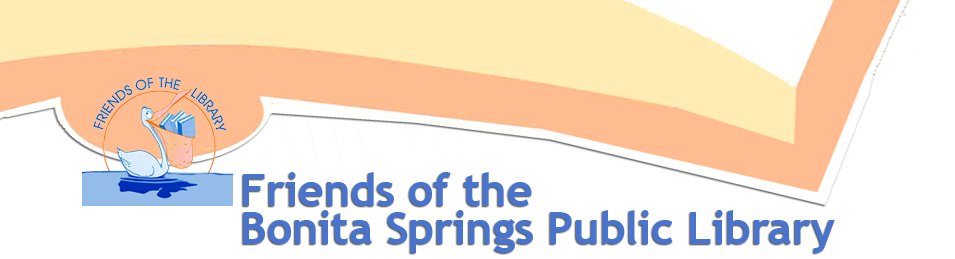
<style>
.page{position:relative;width:955px;height:259px;background:#ffffff}
.page>*{position:absolute;margin:0}
.t1{font:45.4px/37.8px "TrebuchetMS-Bold";letter-spacing:-0.01em;color:#4974ce}
</style>
<div class="page">
<p class="t1" style="left:243px;top:172px;width:592px;height:81px">Friends of the<br>Bonita Springs Public Library</p>
</div>
